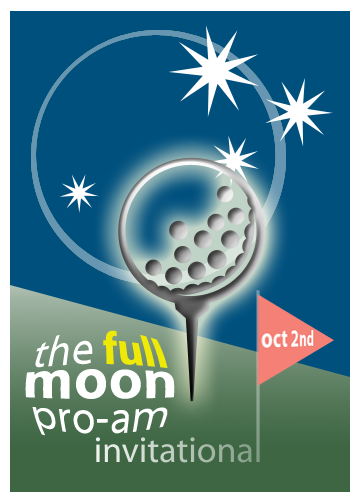
<style>
.page{position:relative;width:360px;height:504px;background:#00507e}
.page>*{position:absolute;margin:0}
.t1{font:38px/28px "Myriad-Roman";color:#ffffff}
.t2{font:38px/28px "Myriad-Bold";color:#efe907}
.t3{font:48px/28px "Myriad-Bold";color:#ffffff}
</style>
<div class="page">
<p class="t1" style="left:25px;top:330px;width:150px;height:106px;text-align:center">the <span class="t2">full<br></span><span class="t3">moon<br></span>pro-am</p>
</div>
